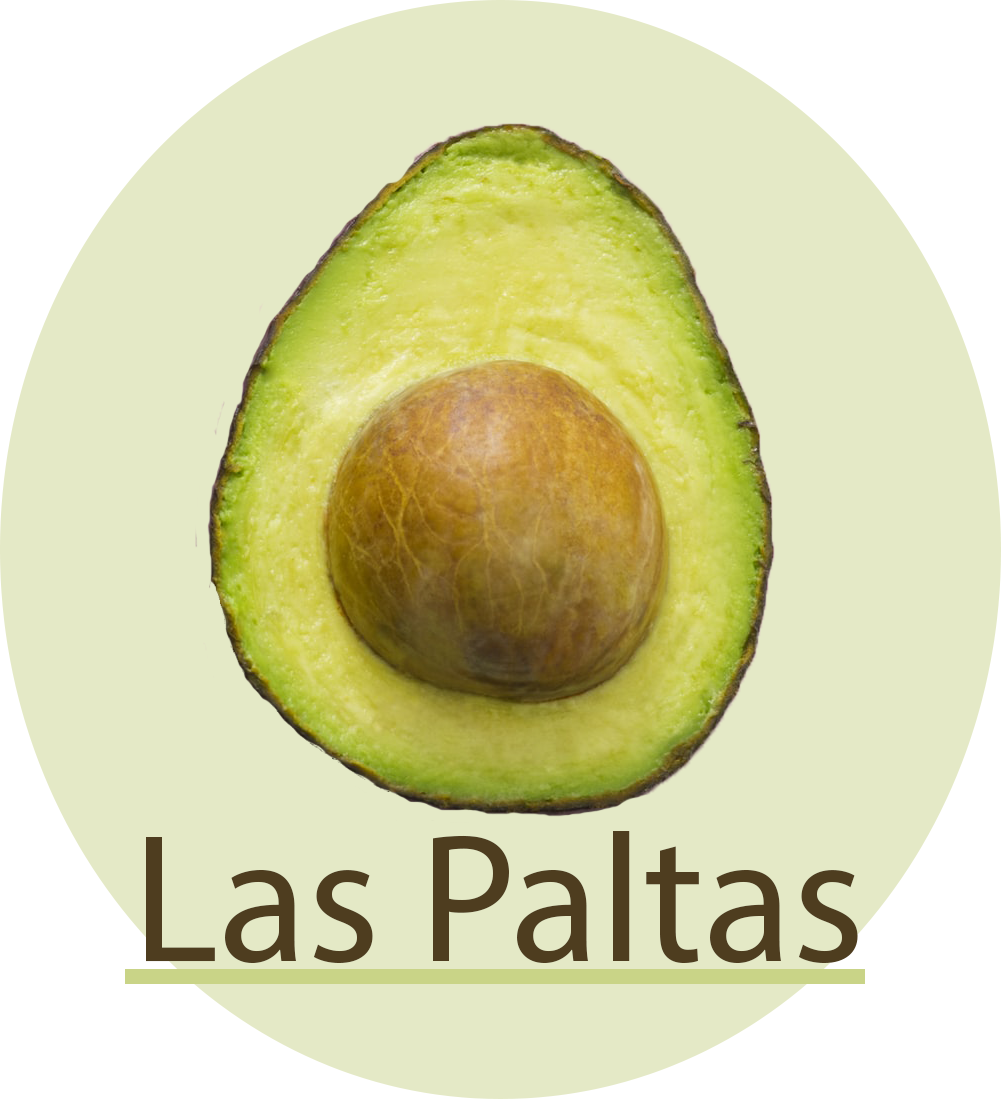
<style>
.page{position:relative;width:1001px;height:1099px;background:#e4e9c6}
.page>*{position:absolute;margin:0}
.t1{font:183.5px "MyriadPro-Regular";color:#4e3d1f}
</style>
<div class="page">
<p class="t1" style="left:146px;top:831px;width:712px;height:132px">Las Paltas</p>
</div>
